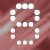
<style>
.page{position:relative;width:50px;height:50px}
.page>*{position:absolute;margin:0}
.t1{font:48px "AtomicClockRadio";color:#ffffff}
</style>
<div class="page">
<p class="t1" style="left:10px;top:3px;width:30px;height:42px">8</p>
</div>
